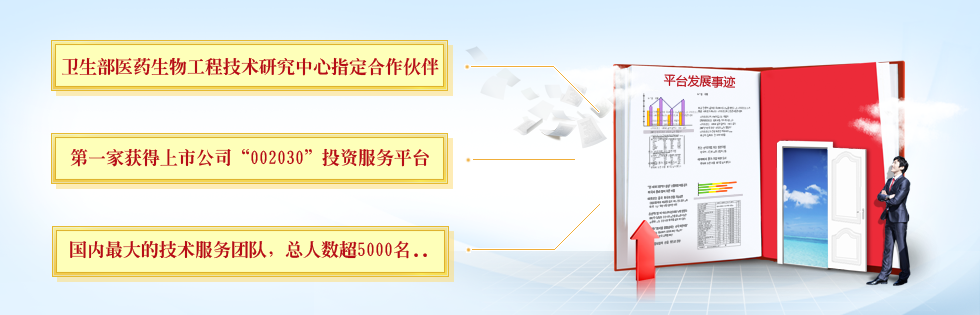
<style>
.page{position:relative;width:980px;height:315px}
.page>*{position:absolute;margin:0}
.t1{font:18px "GBInnMing-Heavy";color:#b60d16;text-transform:uppercase}
.t2{font:12px "MicrosoftYaHei";color:#b60d16;text-transform:uppercase}
</style>
<div class="page">
<p class="t1" style="left:62px;top:57px;width:377px;height:19px">卫生部医药生物工程技术研究中心指定合作伙伴</p>
<p class="t2" style="left:663px;top:74px;width:73px;height:14px;rotate:2deg">平台发展事迹</p>
<p class="t1" style="left:70px;top:148px;width:359px;height:19px">第一家获得上市公司“002030”投资服务平台</p>
<p class="t1" style="left:70px;top:240px;width:357px;height:19px">国内最大的技术服务团队，总人数超5000名..</p>
</div>
